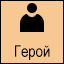
<style>
.page{position:relative;width:64px;height:64px;background:#f8c893}
.page>*{position:absolute;margin:0}
.t1{font:16px "ArialNarrow";color:#000000}
</style>
<div class="page">
<p class="t1" style="left:15px;top:45px;width:35px;height:15px">Герой</p>
</div>
